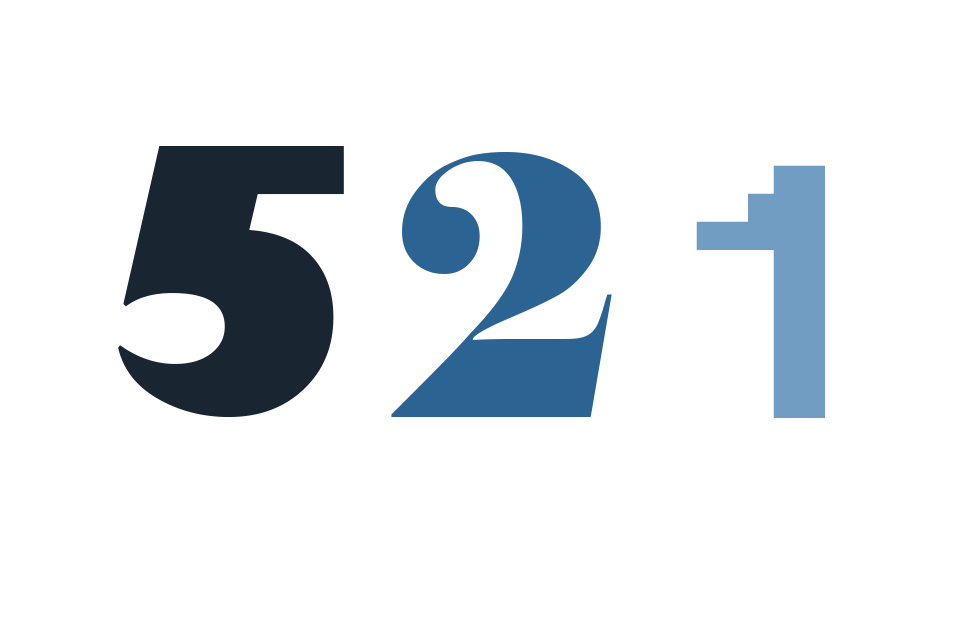
<style>
.page{position:relative;width:980px;height:620px;background:#ffffff}
.page>*{position:absolute;margin:0}
.t1{font:358px "GillSans-UltraBold";color:#192632;scale:0.91 1}
.t2{font:358px "Elephant-Regular";color:#2b6393;scale:0.91 1}
.t3{font:358.7px "Fixedsys";color:#719dc2;scale:0.92 1}
</style>
<div class="page">
<p class="t1" style="left:118px;top:146px;width:226px;height:271px">5</p>
<p class="t2" style="left:391px;top:152px;width:221px;height:265px">2</p>
<p class="t3" style="left:696px;top:165px;width:129px;height:253px">1</p>
</div>
